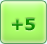
<style>
.page{position:relative;width:47px;height:44px}
.page>*{position:absolute;margin:0}
.t1{font:16px "Verdana-Bold";color:#0e9300}
</style>
<div class="page">
<p class="t1" style="left:12px;top:18px;width:23px;height:13px">+5</p>
</div>
